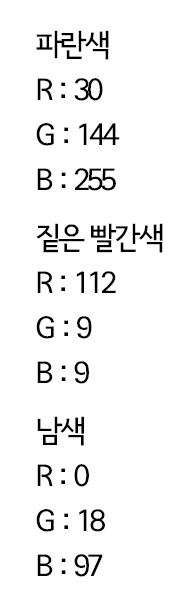
<style>
.page{position:relative;width:189px;height:615px;background:#ffffff}
.page>*{position:absolute;margin:0}
.t1{font:30px/45px "SeoulNamsanB";letter-spacing:-0.1em;color:#000000}
</style>
<div class="page">
<p class="t1" style="left:36px;top:30px;width:84px;height:161px">파란색<br>R : 30<br>G : 144<br>B : 255</p>
<p class="t1" style="left:36px;top:223px;width:127px;height:161px">짙은 빨간색<br>R : 112<br>G : 9<br>B : 9</p>
<p class="t1" style="left:36px;top:416px;width:69px;height:161px">남색<br>R : 0<br>G : 18<br>B : 97</p>
</div>
